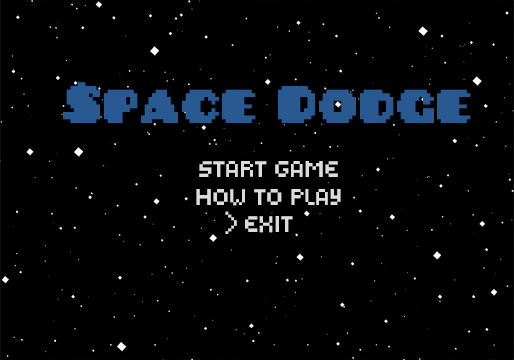
<style>
.page{position:relative;width:514px;height:360px;background:#000000}
.page>*{position:absolute;margin:0}
.t1{font:59.3px "PixelatedPusab";color:#285991}
.t2{font:22.7px "PixelatedDisplayRegular";color:#dcdcdc}
.t3{font:34.5px "PixelatedDisplayRegular";color:#dcdcdc}
</style>
<div class="page">
<p class="t1" style="left:63px;top:82px;width:408px;height:41px">Space Dodge</p>
<p class="t2" style="left:199px;top:161px;width:139px;height:16px">START GAME</p>
<p class="t2" style="left:196px;top:189px;width:145px;height:17px">HOW TO PLAY</p>
<p class="t3" style="left:225px;top:211px;width:12px;height:23px">&gt;</p>
<p class="t2" style="left:245px;top:216px;width:48px;height:17px">EXIT</p>
</div>
